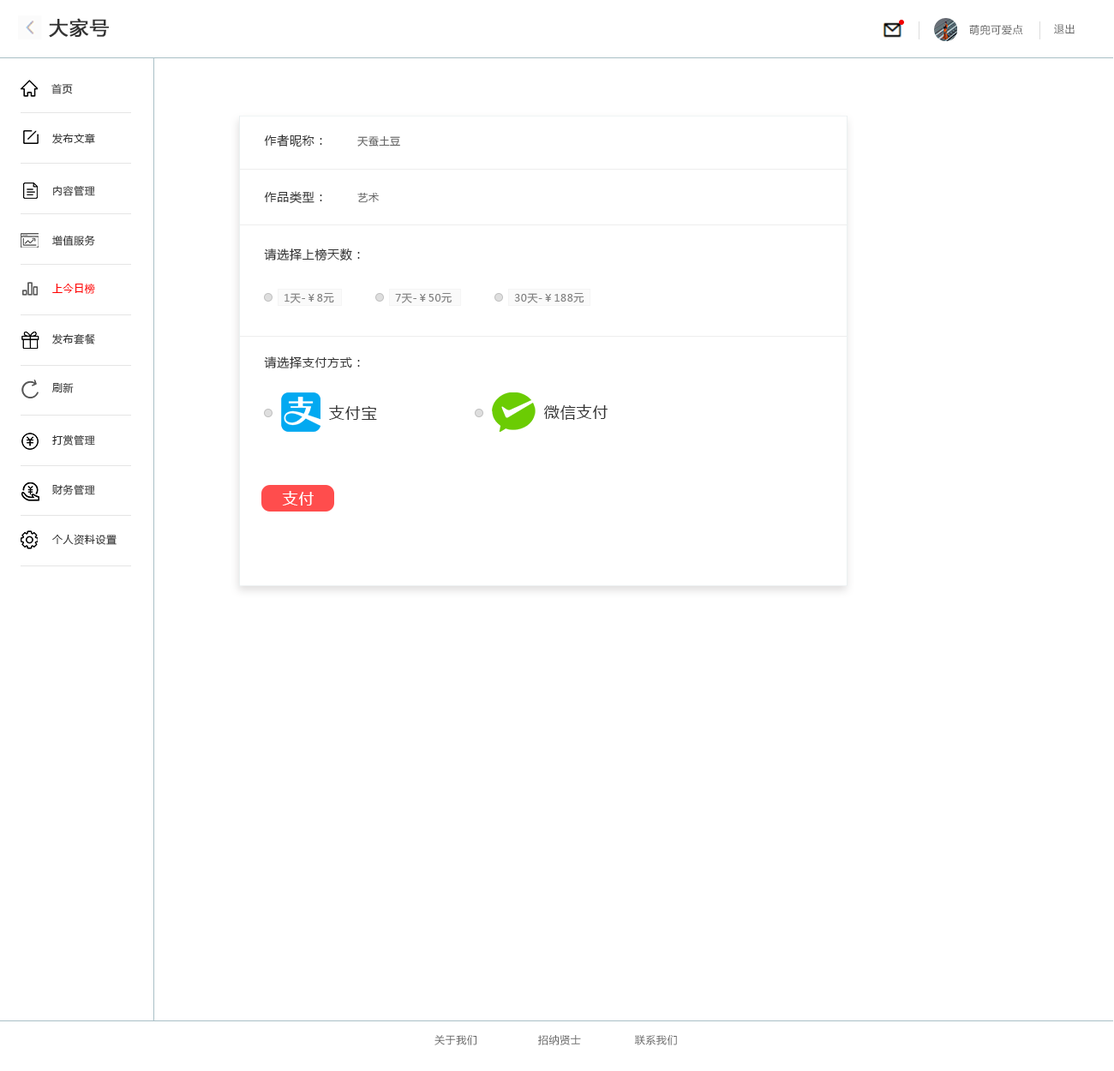
<style>
.page{position:relative;width:1114px;height:1071px;background:#ffffff}
.page>*{position:absolute;margin:0}
.t1{font:18.8px "MicrosoftYaHei";letter-spacing:0.05em;color:#333333;font-weight:bold}
.t2{font:10.3px "MicrosoftYaHei";letter-spacing:0.05em;color:#666666}
.t3{font:10.3px "MicrosoftYaHei";letter-spacing:0.05em;color:#333333}
.t4{font:12px "MicrosoftYaHei";letter-spacing:0.05em;color:#333333}
.t5{font:10.3px "MicrosoftYaHei";letter-spacing:0.05em;color:#ff0000}
.t6{font:10.3px "MicrosoftYaHei";letter-spacing:0.05em;color:#808080}
.t7{font:15.4px "MicrosoftYaHei";letter-spacing:0.05em;color:#333333}
.t8{font:15.4px "MicrosoftYaHei";letter-spacing:0.05em;color:#ffffff}
</style>
<div class="page">
<p class="t1" style="left:49px;top:18px;width:60px;height:20px">大家号</p>
<p class="t2" style="left:969px;top:25px;width:54px;height:10px">萌兜可爱点</p>
<p class="t2" style="left:1054px;top:24px;width:20px;height:10px">退出</p>
<p class="t3" style="left:51px;top:83px;width:22px;height:11px">首页</p>
<p class="t3" style="left:52px;top:133px;width:43px;height:11px">发布文章</p>
<p class="t4" style="left:264px;top:134px;width:136px;height:12px">作者昵称： <span class="t2">天蚕土豆</span></p>
<p class="t3" style="left:53px;top:185px;width:42px;height:11px">内容管理</p>
<p class="t4" style="left:264px;top:191px;width:115px;height:13px">作品类型： <span class="t2">艺术</span></p>
<p class="t3" style="left:52px;top:235px;width:43px;height:11px">增值服务</p>
<p class="t4" style="left:264px;top:248px;width:96px;height:13px">请选择上榜天数：</p>
<p class="t5" style="left:52px;top:283px;width:43px;height:11px">上今日榜</p>
<p class="t6" style="left:284px;top:293px;width:50px;height:10px">1天-￥8元</p>
<p class="t6" style="left:395px;top:293px;width:56px;height:10px">7天-￥50元</p>
<p class="t6" style="left:514px;top:293px;width:70px;height:10px">30天-￥188元</p>
<p class="t3" style="left:52px;top:333px;width:43px;height:11px">发布套餐</p>
<p class="t4" style="left:264px;top:356px;width:96px;height:12px">请选择支付方式：</p>
<p class="t3" style="left:52px;top:383px;width:22px;height:10px">刷新</p>
<p class="t7" style="left:329px;top:405px;width:48px;height:15px">支付宝</p>
<p class="t7" style="left:544px;top:404px;width:63px;height:16px">微信支付</p>
<p class="t3" style="left:52px;top:434px;width:43px;height:11px">打赏管理</p>
<p class="t3" style="left:52px;top:484px;width:43px;height:11px">财务管理</p>
<p class="t8" style="left:282px;top:491px;width:32px;height:14px">支付</p>
<p class="t3" style="left:52px;top:534px;width:65px;height:11px">个人资料设置</p>
<p class="t2" style="left:434px;top:1035px;width:243px;height:10px">关于我们                 招纳贤士               联系我们</p>
</div>
